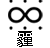
<style>
.page{position:relative;width:50px;height:48px;background:#ffffff}
.page>*{position:absolute;margin:0}
.t1{font:18px "OPPOSans-R";color:#000000}
</style>
<div class="page">
<p class="t1" style="left:17px;top:31px;width:16px;height:16px">霾</p>
</div>
